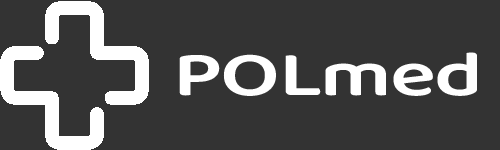
<style>
.page{position:relative;width:500px;height:150px;background:#333333}
.page>*{position:absolute;margin:0}
.t1{font:64.6px "BalooBhaijaan2-SemiBold";letter-spacing:-0.02em;color:#ffffff;scale:1.33 1}
</style>
<div class="page">
<p class="t1" style="left:179px;top:52px;width:298px;height:44px">POLmed</p>
</div>
